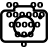
<style>
.page{position:relative;width:48px;height:48px;background:#ffffff}
.page>*{position:absolute;margin:0}
.t1{font:12.1px/9.8px "Corbel-Bold";color:#000000;font-weight:bold}
.t2{font:12.1px/9.8px "Corbel-Bold";letter-spacing:-0.01em;color:#000000;font-weight:bold}
.t3{font:12.1px/9.8px "Corbel-Bold";letter-spacing:0.01em;color:#000000;font-weight:bold}
</style>
<div class="page">
<p class="t1" style="left:6px;top:2px;width:39px;height:45px">00    00<br> 000000<br><span class="t2">  00000<br></span>    000<br><span class="t3">      0</span></p>
</div>
